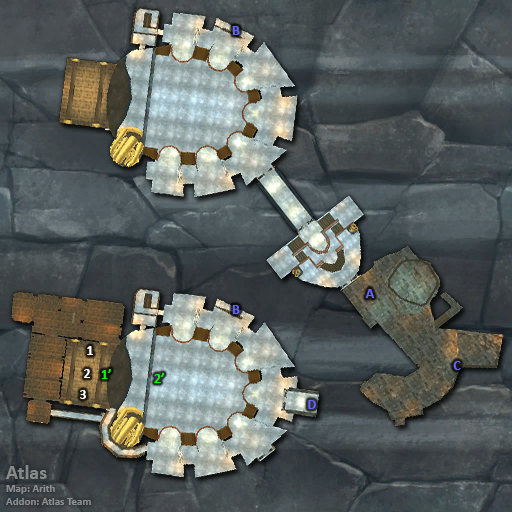
<style>
.page{position:relative;width:512px;height:512px}
.page>*{position:absolute;margin:0}
.t1{font:14px "Calibri-Bold";color:#6666ff}
.t2{font:14px "Calibri-Bold";color:#ffffff}
.t3{font:14px "Calibri-Bold";color:#00ff00}
.t4{font:11px "Calibri-Bold";color:#8a8c8e}
.t5{font:20px "Calibri-Bold";color:#8a8c8e}
</style>
<div class="page">
<p class="t1" style="left:232px;top:26px;width:8px;height:9px">B</p>
<p class="t1" style="left:365px;top:289px;width:9px;height:9px">A</p>
<p class="t1" style="left:232px;top:305px;width:8px;height:9px">B</p>
<p class="t2" style="left:87px;top:346px;width:6px;height:9px">1</p>
<p class="t1" style="left:453px;top:361px;width:8px;height:9px">C</p>
<p class="t2" style="left:84px;top:369px;width:7px;height:9px">2</p>
<p class="t3" style="left:101px;top:369px;width:10px;height:10px">1’</p>
<p class="t3" style="left:154px;top:373px;width:10px;height:10px">2’</p>
<p class="t2" style="left:80px;top:390px;width:6px;height:9px">3</p>
<p class="t1" style="left:308px;top:400px;width:8px;height:9px">D</p>
<p class="t4" style="left:6px;top:465px;width:85px;height:40px"><span class="t5">Atlas<br></span>Map: Arith<br>Addon: Atlas Team</p>
</div>
